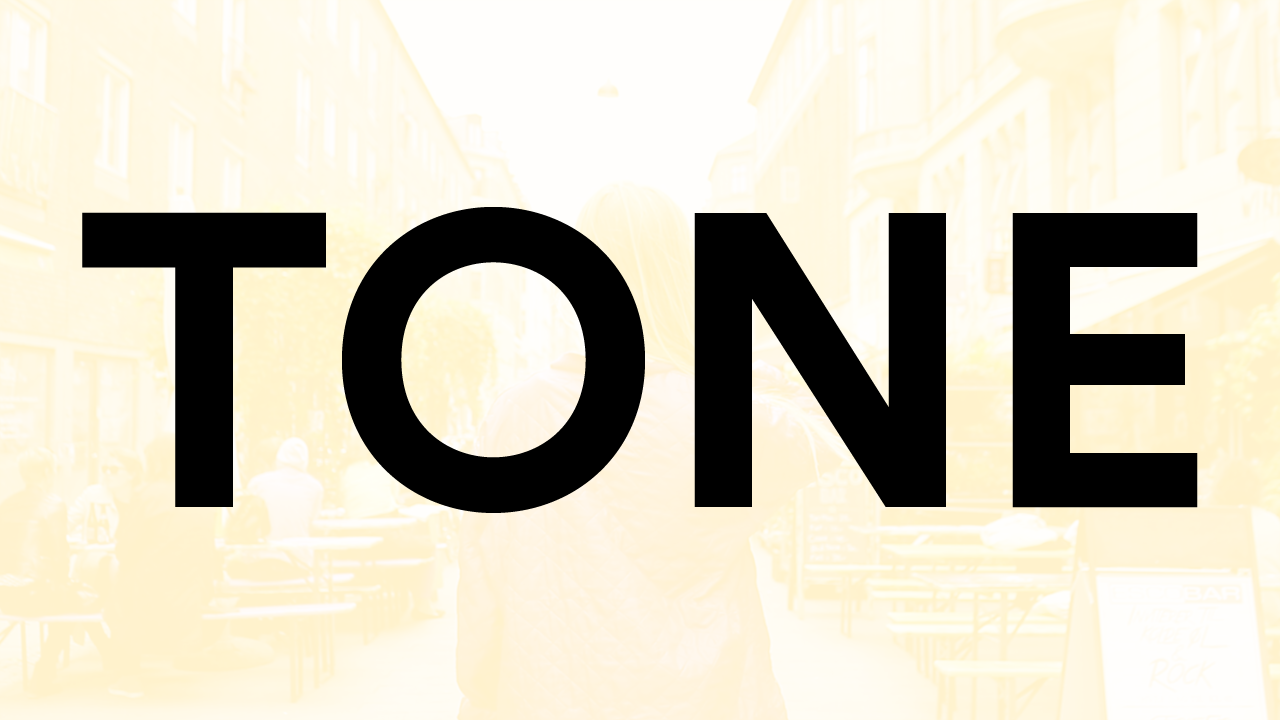
<style>
.page{position:relative;width:1280px;height:720px}
.page>*{position:absolute;margin:0}
.t1{font:415.1px "CircularStd-Bold";color:#000000}
</style>
<div class="page">
<p class="t1" style="left:82px;top:207px;width:1116px;height:306px">TONE</p>
</div>
